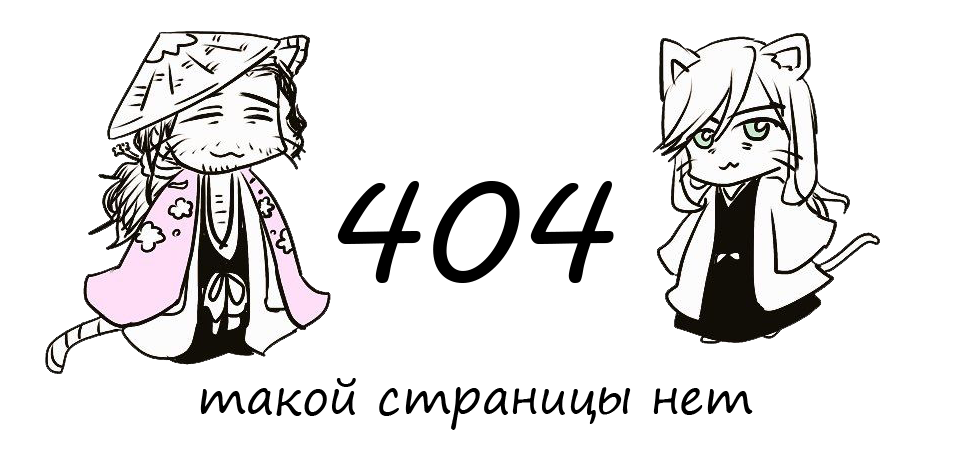
<style>
.page{position:relative;width:962px;height:465px;background:#ffffff}
.page>*{position:absolute;margin:0}
.t1{font:140px "MVBoli";color:#000000}
.t2{font:48px "SegoePrint";color:#000000}
</style>
<div class="page">
<p class="t1" style="left:337px;top:181px;width:277px;height:102px">404</p>
<p class="t2" style="left:200px;top:378px;width:553px;height:52px">такой страницы нет</p>
</div>
